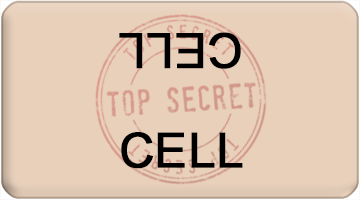
<style>
.page{position:relative;width:360px;height:200px;background:#e8d0bb}
.page>*{position:absolute;margin:0}
.t1{font:48px "ArialMT";color:#000000;font-weight:bold}
</style>
<div class="page">
<p class="t1" style="left:119px;top:32px;width:122px;height:37px;rotate:180deg">CELL</p>
<p class="t1" style="left:121px;top:132px;width:122px;height:37px">CELL</p>
</div>
